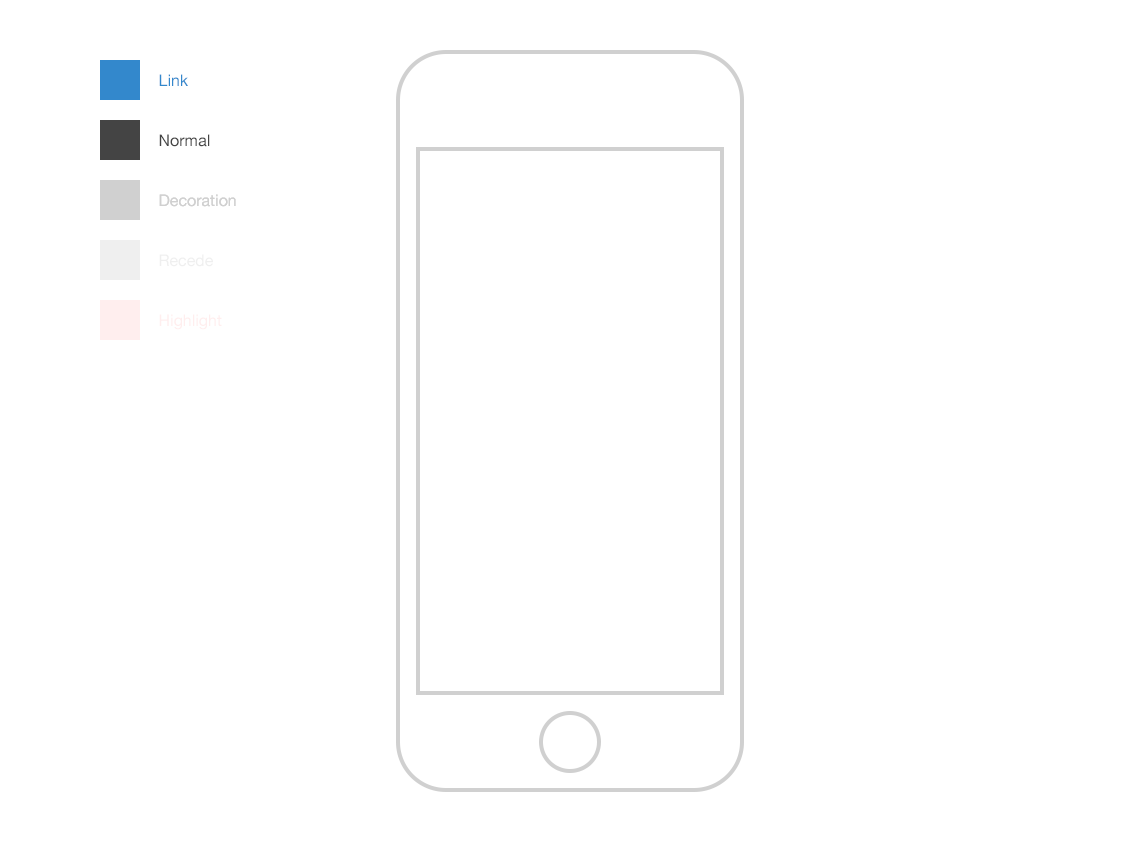
<style>
.page{position:relative;width:1140px;height:842px;background:#ffffff}
.page>*{position:absolute;margin:0}
.t1{font:16px "HelveticaNeue";color:#3388cc}
.t2{font:16px "HelveticaNeue";color:#444444}
.t3{font:16px "HelveticaNeue";color:#d0d0d0}
.t4{font:16px "HelveticaNeue";color:#efefef}
.t5{font:16px "HelveticaNeue";color:#ffeeee}
</style>
<div class="page">
<p class="t1" style="left:159px;top:74px;width:29px;height:12px">Link</p>
<p class="t2" style="left:159px;top:134px;width:51px;height:13px">Normal</p>
<p class="t3" style="left:159px;top:194px;width:77px;height:13px">Decoration</p>
<p class="t3" style="left:159px;top:194px;width:77px;height:13px">Decoration</p>
<p class="t4" style="left:159px;top:254px;width:54px;height:13px">Recede</p>
<p class="t5" style="left:159px;top:314px;width:63px;height:16px">Highlight</p>
</div>
